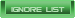
<style>
.page{position:relative;width:75px;height:18px;background:#70d377}
.page>*{position:absolute;margin:0}
.t1{font:9px "Bitsumishi";color:#b5e0b5}
</style>
<div class="page">
<p class="t1" style="left:11px;top:7px;width:54px;height:5px">Ignore List</p>
</div>
